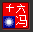
<style>
.page{position:relative;width:33px;height:32px;background:#f20000}
.page>*{position:absolute;margin:0}
.t1{font:10.4px "SimSun";color:#ffffff}
.t2{font:11.7px "SimSun";color:#ffffff}
</style>
<div class="page">
<p class="t1" style="left:6px;top:4px;width:19px;height:9px">十六</p>
<p class="t2" style="left:16px;top:15px;width:11px;height:12px">冯</p>
</div>
